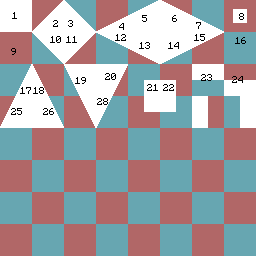
<style>
.page{position:relative;width:256px;height:256px;background:#b16767}
.page>*{position:absolute;margin:0}
.t1{font:8px "Minecraftia";color:#000000}
</style>
<div class="page">
<p class="t1" style="left:12px;top:12px;width:5px;height:7px">1</p>
<p class="t1" style="left:142px;top:15px;width:5px;height:7px">5</p>
<p class="t1" style="left:172px;top:15px;width:5px;height:7px">6</p>
<p class="t1" style="left:239px;top:13px;width:5px;height:7px">8</p>
<p class="t1" style="left:53px;top:20px;width:5px;height:7px">2</p>
<p class="t1" style="left:68px;top:20px;width:5px;height:7px">3</p>
<p class="t1" style="left:119px;top:23px;width:5px;height:7px">4</p>
<p class="t1" style="left:196px;top:22px;width:5px;height:7px">7</p>
<p class="t1" style="left:50px;top:36px;width:11px;height:7px">10</p>
<p class="t1" style="left:66px;top:36px;width:11px;height:7px">11</p>
<p class="t1" style="left:115px;top:34px;width:11px;height:7px">12</p>
<p class="t1" style="left:194px;top:34px;width:11px;height:7px">15</p>
<p class="t1" style="left:235px;top:37px;width:11px;height:7px">16</p>
<p class="t1" style="left:11px;top:48px;width:5px;height:7px">9</p>
<p class="t1" style="left:139px;top:42px;width:11px;height:7px">13</p>
<p class="t1" style="left:168px;top:42px;width:11px;height:7px">14</p>
<p class="t1" style="left:75px;top:77px;width:11px;height:7px">19</p>
<p class="t1" style="left:105px;top:73px;width:11px;height:7px">20</p>
<p class="t1" style="left:201px;top:74px;width:11px;height:7px">23</p>
<p class="t1" style="left:232px;top:76px;width:11px;height:7px">24</p>
<p class="t1" style="left:20px;top:87px;width:11px;height:7px">17</p>
<p class="t1" style="left:33px;top:87px;width:11px;height:7px">18</p>
<p class="t1" style="left:147px;top:84px;width:11px;height:7px">21</p>
<p class="t1" style="left:163px;top:84px;width:11px;height:7px">22</p>
<p class="t1" style="left:97px;top:98px;width:11px;height:7px">28</p>
<p class="t1" style="left:11px;top:108px;width:11px;height:7px">25</p>
<p class="t1" style="left:43px;top:108px;width:11px;height:7px">26</p>
</div>
